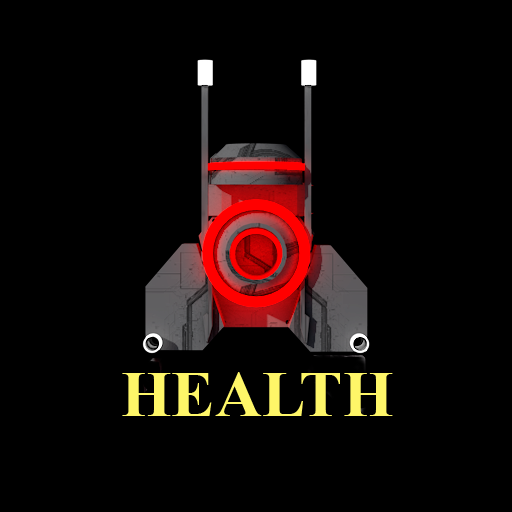
<style>
.page{position:relative;width:512px;height:512px;background:#000000}
.page>*{position:absolute;margin:0}
.t1{font:65px "TimesNewRomanPS-BoldMT";color:#fef668}
</style>
<div class="page">
<p class="t1" style="left:122px;top:372px;width:271px;height:44px">HEALTH</p>
</div>
